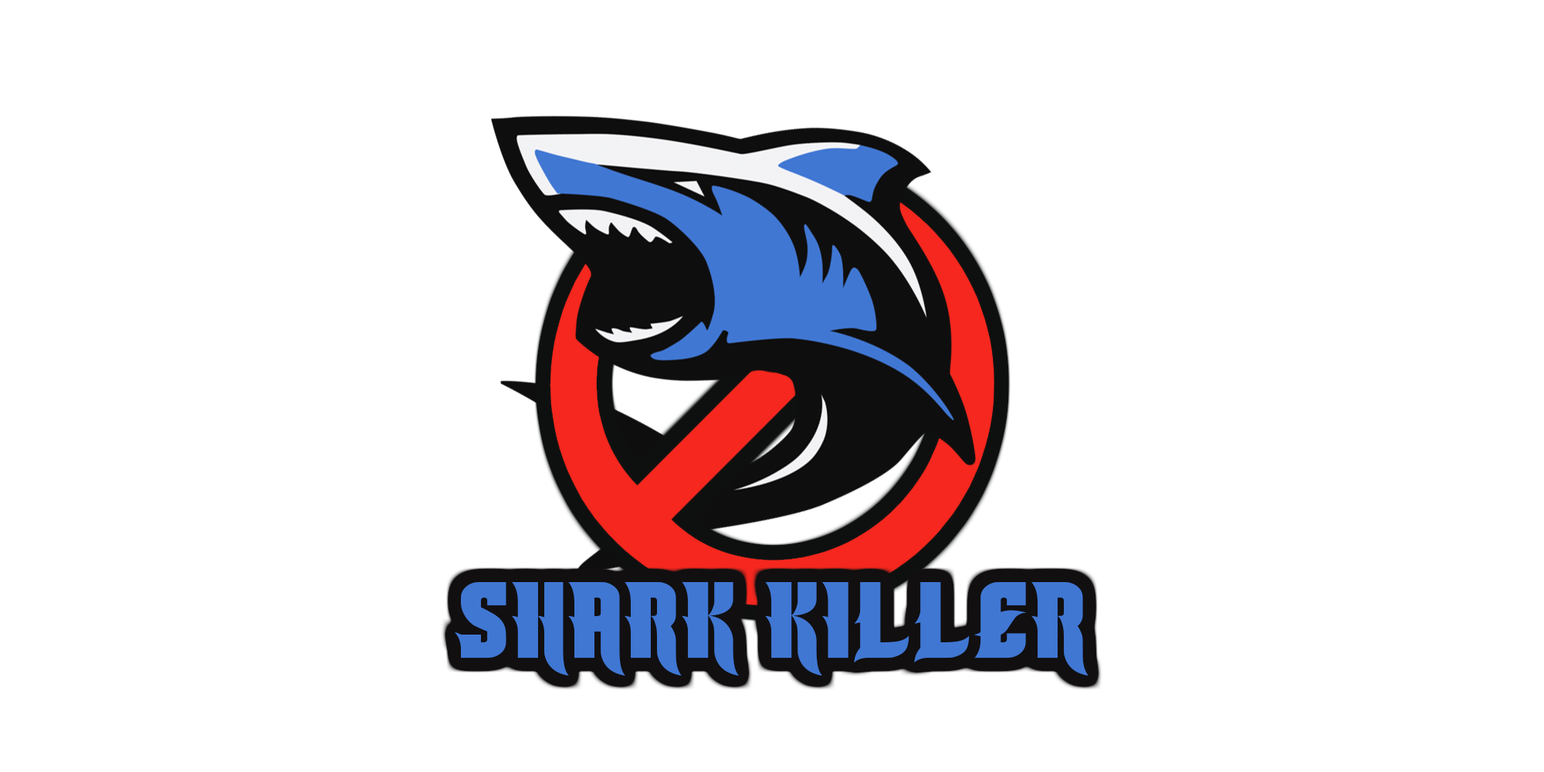
<style>
.page{position:relative;width:1544px;height:772px;background:#ffffff}
.page>*{position:absolute;margin:0}
.t1{font:115.8px "CMSharkWeek";color:#4077d3}
</style>
<div class="page">
<p class="t1" style="left:455px;top:581px;width:634px;height:95px">SHARK KILLER</p>
</div>
